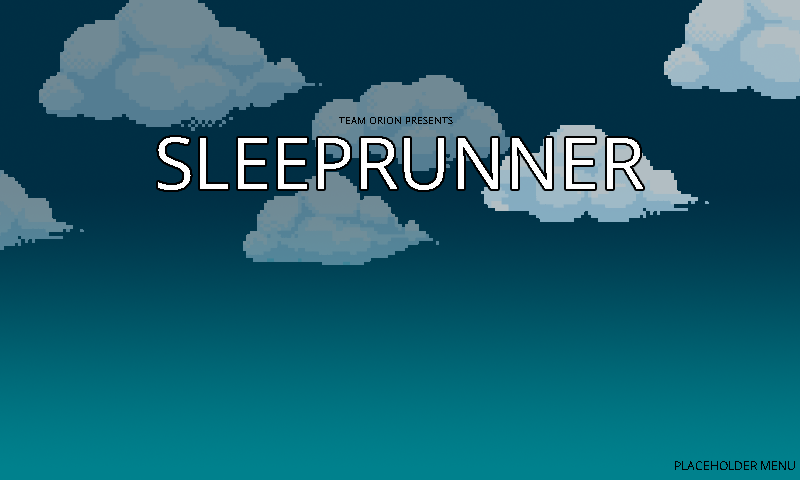
<style>
.page{position:relative;width:800px;height:480px}
.page>*{position:absolute;margin:0}
.t1{font:10px "OpenSans";color:#000000}
.t2{font:72px "OpenSans";color:#ffffff}
.t3{font:12px "OpenSans";color:#000000}
</style>
<div class="page">
<p class="t1" style="left:339px;top:117px;width:114px;height:7px">TEAM ORION PRESENTS</p>
<p class="t2" style="left:158px;top:137px;width:485px;height:53px">SLEEPRUNNER</p>
<p class="t3" style="left:675px;top:461px;width:120px;height:9px">PLACEHOLDER MENU</p>
</div>
